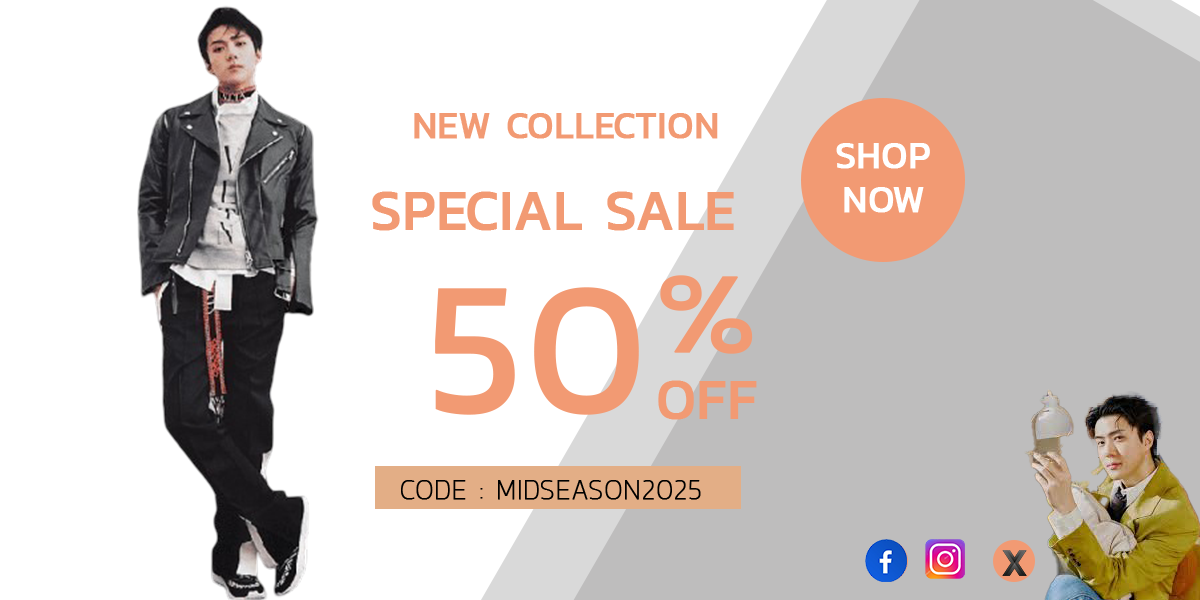
<style>
.page{position:relative;width:1200px;height:600px;background:#ffffff}
.page>*{position:absolute;margin:0}
.t1{font:38.6px "Kanit-Regular";color:#f29a73;font-weight:bold;scale:0.96 1}
.t2{font:38.6px "Kanit-Regular";color:#ffffff;font-weight:bold;scale:0.96 1}
.t3{font:57.4px "Kanit-Regular";color:#f29a73;font-weight:bold;scale:0.96 1}
.t4{font:114.9px "Kanit-Regular";color:#f29a73;font-weight:bold;scale:1.23 1}
.t5{font:191.3px "Kanit-Regular";color:#f29a73;font-weight:bold;scale:0.96 1}
.t6{font:58.2px "Kanit-Regular";color:#f29a73;font-weight:bold;scale:0.96 1}
.t7{font:27.7px "Kanit-Thin";letter-spacing:0.02em;color:#000000;font-weight:bold;scale:0.96 1}
</style>
<div class="page">
<p class="t1" style="left:414px;top:113px;width:304px;height:26px">NEW COLLECTION</p>
<p class="t2" style="left:836px;top:143px;width:94px;height:26px">SHOP</p>
<p class="t3" style="left:372px;top:191px;width:362px;height:40px">SPECIAL SALE</p>
<p class="t2" style="left:844px;top:187px;width:80px;height:26px">NOW</p>
<p class="t4" style="left:660px;top:275px;width:93px;height:79px">%</p>
<p class="t5" style="left:435px;top:287px;width:204px;height:128px">50</p>
<p class="t6" style="left:658px;top:380px;width:99px;height:40px">OFF</p>
<p class="t7" style="left:401px;top:480px;width:300px;height:20px">CODE : MIDSEASON2025</p>
</div>
